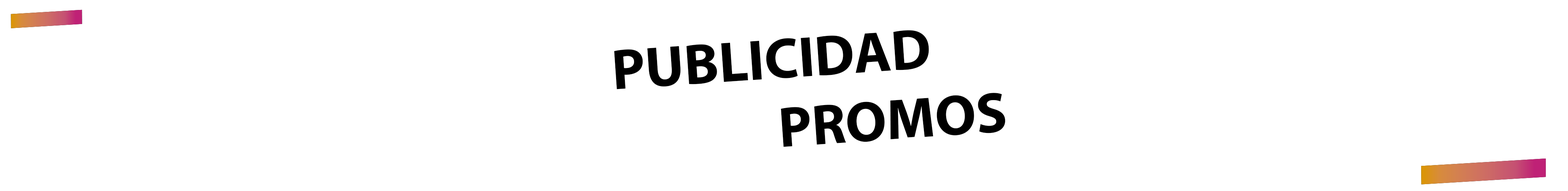
<style>
.page{position:relative;width:1568px;height:191px;background:#ffffff}
.page>*{position:absolute;margin:0}
.t1{font:57.4px "MyriadPro-Bold";color:#000000}
</style>
<div class="page">
<p class="t1" style="left:614px;top:30px;width:391px;height:117px;rotate:-4deg">PUBLICIDAD<br>              PROMOS</p>
</div>
